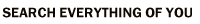
<style>
.page{position:relative;width:200px;height:24px;background:#ffffff}
.page>*{position:absolute;margin:0}
.t1{font:14px "FranklinGothicDemiC";color:#110901;text-transform:uppercase}
</style>
<div class="page">
<p class="t1" style="left:2px;top:7px;width:190px;height:11px">SEARCH everything of you</p>
</div>
